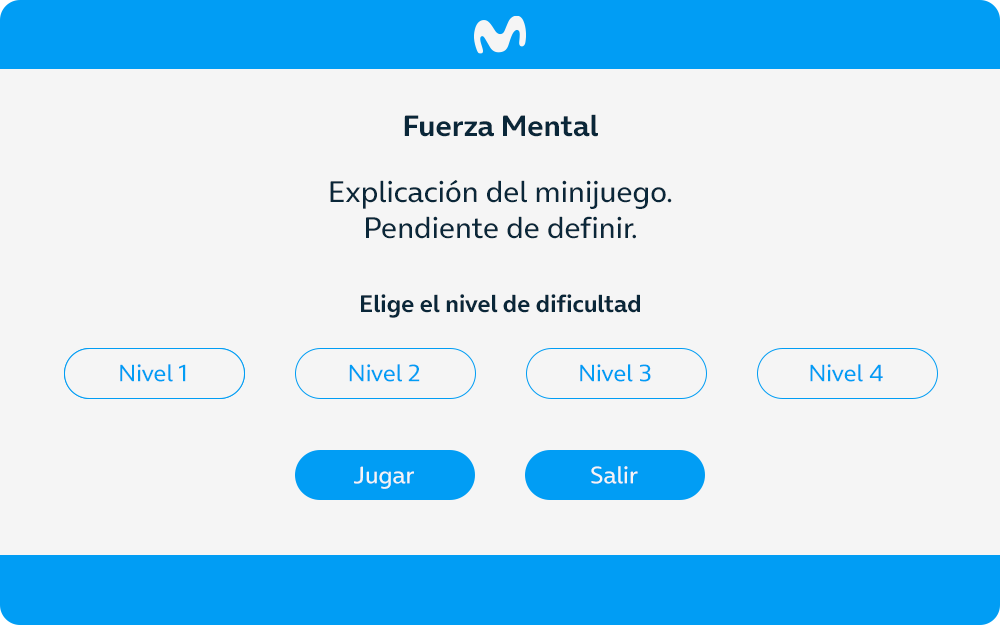
<style>
.page{position:relative;width:1000px;height:625px;background:#f5f5f5}
.page>*{position:absolute;margin:0}
.t1{font:30px "OnAir-Bold";color:#0a2739}
.t2{font:30px "OnAir-Regular";color:#0a2739}
.t3{font:24px "OnAir-Bold";color:#0a2739}
.t4{font:24px "OnAir-Regular";color:#019df4}
.t5{font:24px "OnAir-Regular";color:#f5f5f5}
</style>
<div class="page">
<p class="t1" style="left:404px;top:114px;width:194px;height:23px">Fuerza Mental</p>
<p class="t2" style="left:330px;top:180px;width:342px;height:59px;text-align:center">Explicación del minijuego.<br>Pendiente de definir.</p>
<p class="t3" style="left:361px;top:294px;width:279px;height:24px">Elige el nivel de dificultad</p>
<p class="t4" style="left:120px;top:364px;width:66px;height:18px">Nivel 1</p>
<p class="t4" style="left:120px;top:364px;width:66px;height:18px">Nivel 1</p>
<p class="t4" style="left:349px;top:364px;width:71px;height:18px">Nivel 2</p>
<p class="t4" style="left:580px;top:364px;width:71px;height:18px">Nivel 3</p>
<p class="t4" style="left:810px;top:364px;width:73px;height:18px">Nivel 4</p>
<p class="t5" style="left:354px;top:466px;width:60px;height:23px">Jugar</p>
<p class="t5" style="left:591px;top:466px;width:47px;height:18px">Salir</p>
</div>
